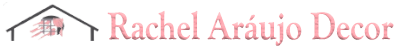
<style>
.page{position:relative;width:400px;height:50px;background:#ffffff}
.page>*{position:absolute;margin:0}
.t1{font:39.6px "GoudyOldStyleT-Bold";color:#ffa5ae;scale:0.84 1}
</style>
<div class="page">
<p class="t1" style="left:107px;top:10px;width:287px;height:36px">Rachel Aráujo Decor</p>
</div>
